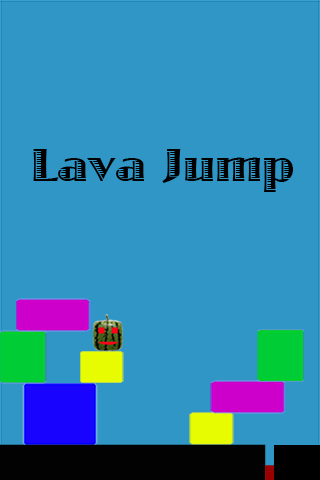
<style>
.page{position:relative;width:320px;height:480px;background:#3096c6}
.page>*{position:absolute;margin:0}
.t1{font:48px "JazzLetPlain";color:#000000}
</style>
<div class="page">
<p class="t1" style="left:33px;top:149px;width:261px;height:43px">Lava Jump</p>
</div>
